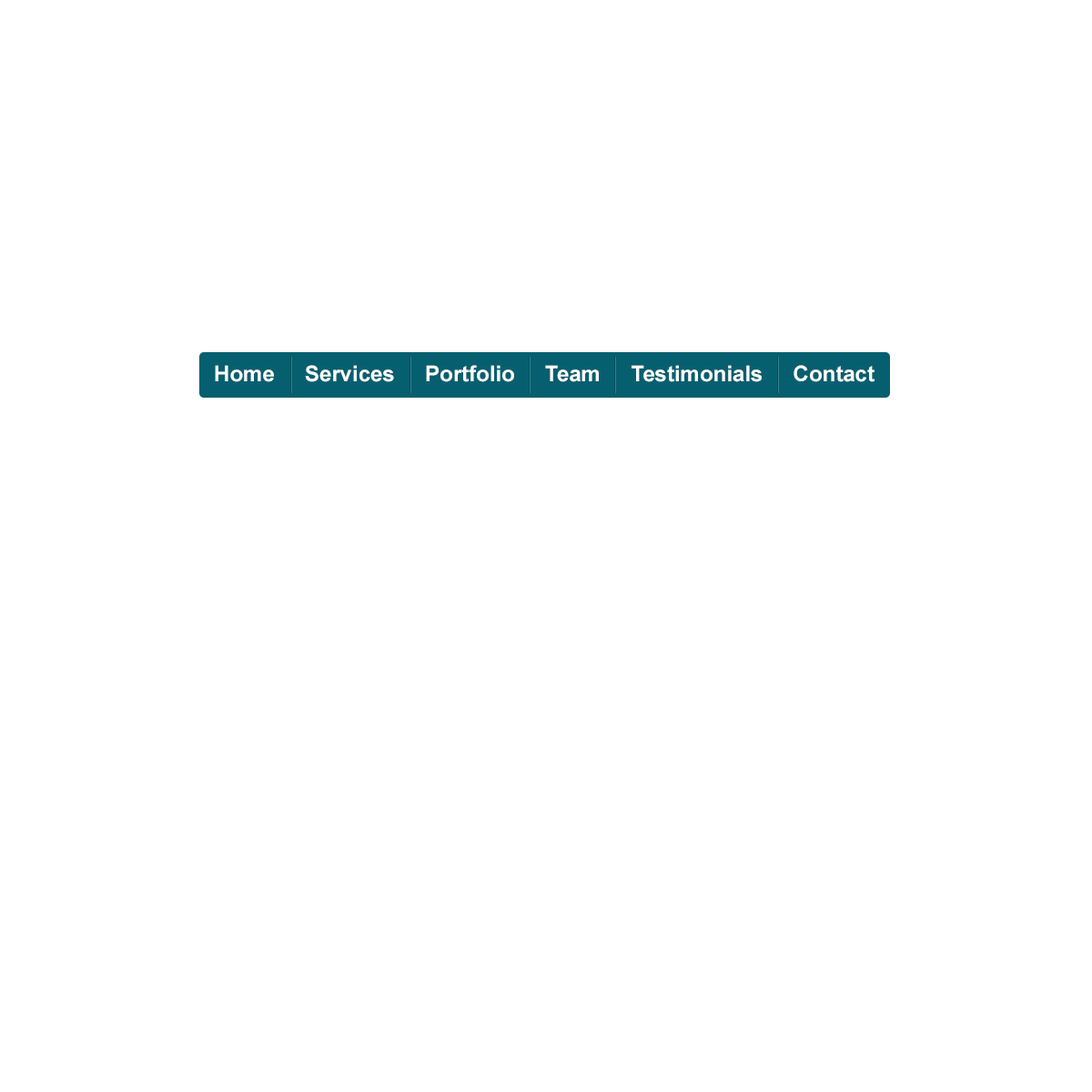
<style>
.page{position:relative;width:1092px;height:1092px;background:#ffffff}
.page>*{position:absolute;margin:0}
.t1{font:21.8px "Arial-BoldMT";color:#ffffff}
</style>
<div class="page">
<p class="t1" style="left:215px;top:365px;width:659px;height:17px">Home     Services     Portfolio     Team     Testimonials     Contact</p>
</div>
